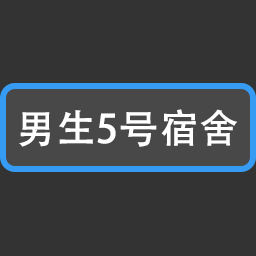
<style>
.page{position:relative;width:256px;height:256px;background:#333333}
.page>*{position:absolute;margin:0}
.t1{font:39px "AdobeHeitiStd-Regular";color:#ffffff;font-weight:bold}
</style>
<div class="page">
<p class="t1" style="left:19px;top:109px;width:218px;height:38px">男生5号宿舍</p>
</div>
